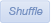
<style>
.page{position:relative;width:51px;height:23px}
.page>*{position:absolute;margin:0}
.t1{font:11px "HelveticaNeue-Italic";color:#7691c2}
</style>
<div class="page">
<p class="t1" style="left:9px;top:7px;width:34px;height:8px">Shuffle</p>
</div>
